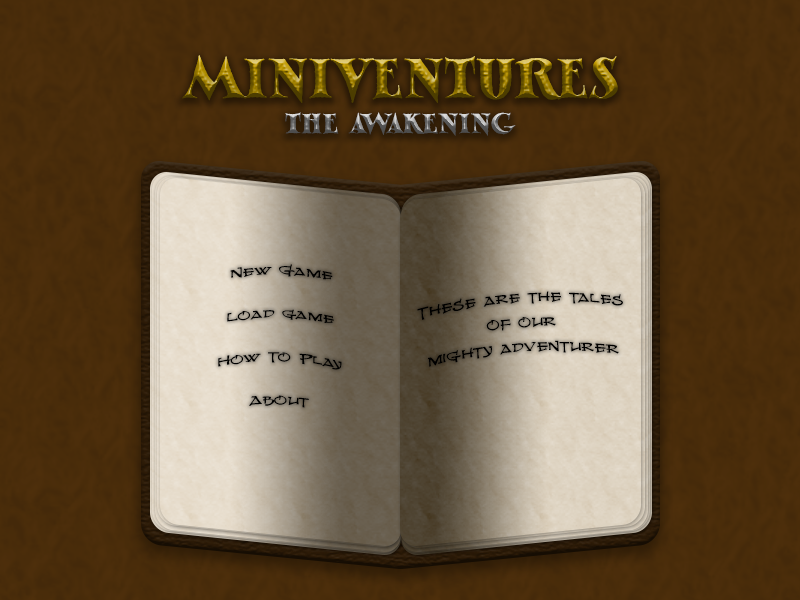
<style>
.page{position:relative;width:800px;height:600px}
.page>*{position:absolute;margin:0}
.t1{font:72px "MythMakerBB"}
.t2{font:36px "MythMakerBB"}
.t3{font:18px "MjollnirBB";color:#020202}
.t4{font:20.6px "MjollnirBB";color:#000000;scale:0.87 1}
</style>
<div class="page">
<p class="t1" style="left:182px;top:55px;width:436px;height:48px">MINIVENTURES</p>
<p class="t2" style="left:285px;top:112px;width:231px;height:24px">THE AWAKENING</p>
<p class="t3" style="left:218px;top:264px;width:124px;height:144px;text-align:center;rotate:1deg">New Game<br><br>Load game<br><br>How To Play<br><br>About</p>
<p class="t4" style="left:417px;top:291px;width:206px;height:76px;text-align:center;rotate:-4deg">These are the tales<br>of our<br>mighty adventurer</p>
</div>
